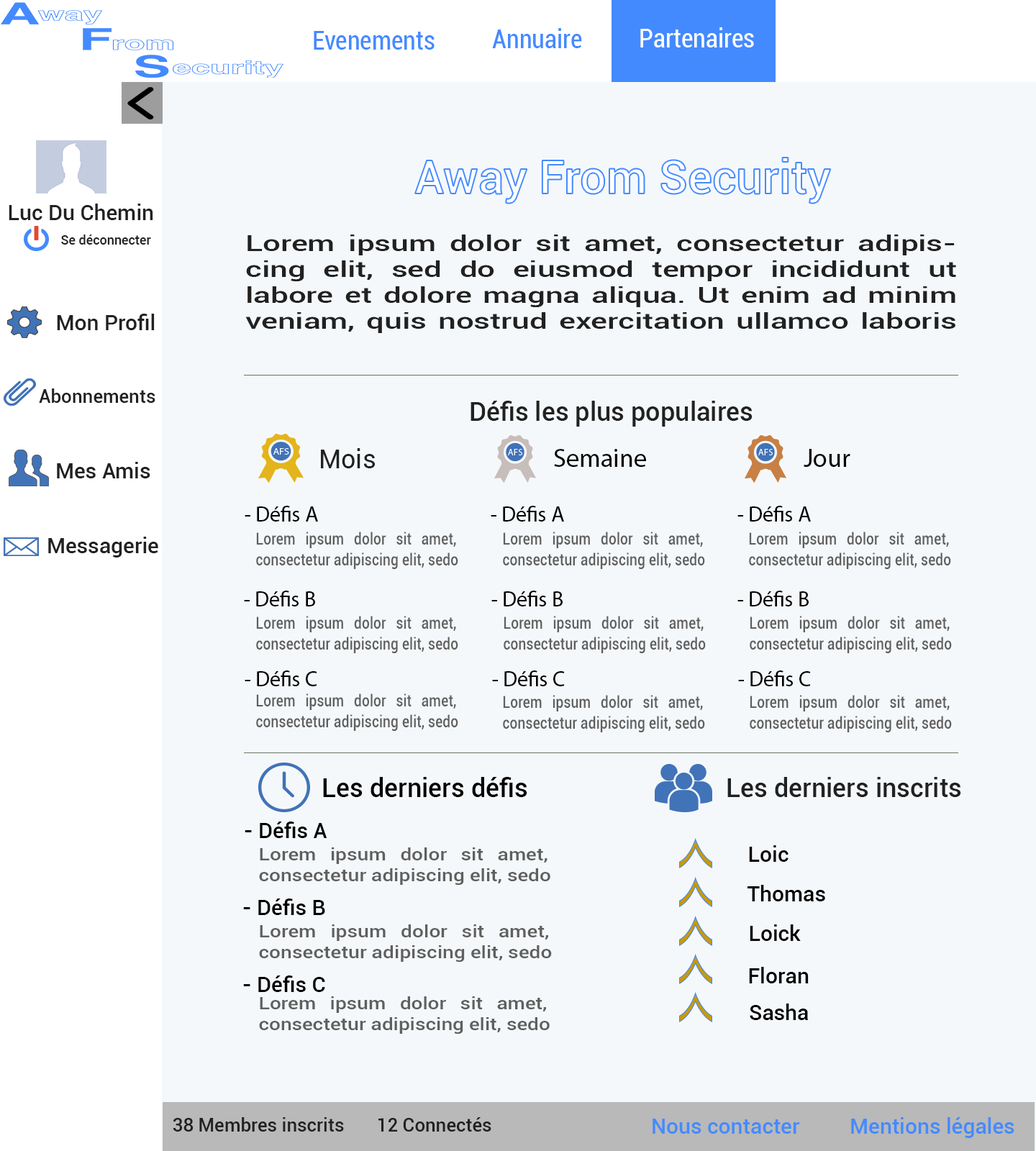
<style>
.page{position:relative;width:1036px;height:1151px;background:#f5f8fa}
.page>*{position:absolute;margin:0}
.t1{font:25.9px "Roboto-Condensed";color:#448aff}
.t2{font:25.9px "Roboto-Condensed";color:#ffffff}
.t3{font:46.8px "Roboto-Medium";color:#ffffff}
.t4{font:21.6px "Roboto-Medium";color:#212121}
.t5{font:12.9px "Roboto-Medium";color:#212121}
.t6{font:21.6px "Roboto-Medium";color:#212121;scale:1.45 1}
.t7{font:18.7px "Roboto-Medium";color:#212121}
.t8{font:25.9px "Roboto-Medium";color:#212121}
.t9{font:25.9px "Roboto-Regular";color:#212121}
.t10{font:25.9px "MyriadPro-Regular";color:#010101}
.t11{font:21.6px "MyriadPro-Regular";color:#000000}
.t12{font:17.3px "Roboto-Medium";color:#5f5f5f;scale:0.81 1}
.t13{font:25.9px "Roboto-Medium";color:#000000}
.t14{font:21.6px "Roboto-Medium";color:#000000}
.t15{font:17.3px "Roboto-Medium";color:#5f5f5f;scale:1.17 1}
.t16{font:17.3px "Roboto-Medium";color:#5f5f5f;scale:1.16 1}
.t17{font:21.6px "Roboto-Medium";color:#448aff}
</style>
<div class="page">
<p class="t1" style="left:492px;top:28px;width:90px;height:20px">Annuaire</p>
<p class="t2" style="left:640px;top:27px;width:114px;height:20px">Partenaires</p>
<p class="t1" style="left:314px;top:31px;width:121px;height:19px">Evenements</p>
<p class="t3" style="left:415px;top:158px;width:416px;height:46px">Away From Security</p>
<p class="t4" style="left:9px;top:204px;width:144px;height:16px">Luc Du Chemin</p>
<p class="t5" style="left:61px;top:235px;width:90px;height:10px">Se déconnecter</p>
<p class="t6" style="left:245px;top:235px;width:711px;height:98px;text-align:justify">Lorem ipsum dolor sit amet, consectetur adipiscing elit, sed do eiusmod tempor incididunt ut labore et dolore magna aliqua. Ut enim ad minim veniam, quis nostrud exercitation ullamco laboris nisi ut aliquip ex ea.</p>
<p class="t4" style="left:57px;top:314px;width:98px;height:16px">Mon Profil</p>
<p class="t7" style="left:39px;top:388px;width:116px;height:15px">Abonnements</p>
<p class="t8" style="left:470px;top:401px;width:283px;height:26px">Défis les plus populaires</p>
<p class="t9" style="left:321px;top:448px;width:54px;height:20px">Mois</p>
<p class="t10" style="left:554px;top:449px;width:92px;height:18px">Semaine</p>
<p class="t10" style="left:804px;top:449px;width:46px;height:18px">Jour</p>
<p class="t4" style="left:57px;top:462px;width:93px;height:16px">Mes Amis</p>
<p class="t11" style="left:245px;top:506px;width:73px;height:16px">- Défis A</p>
<p class="t11" style="left:491px;top:506px;width:73px;height:16px">- Défis A</p>
<p class="t11" style="left:737px;top:506px;width:74px;height:16px">- Défis A</p>
<p class="t12" style="left:256px;top:532px;width:202px;height:37px;text-align:justify">Lorem ipsum dolor sit amet, consectetur adipiscing elit, sedo</p>
<p class="t12" style="left:503px;top:532px;width:202px;height:37px;text-align:justify">Lorem ipsum dolor sit amet, consectetur adipiscing elit, sedo</p>
<p class="t12" style="left:749px;top:532px;width:202px;height:37px;text-align:justify">Lorem ipsum dolor sit amet, consectetur adipiscing elit, sedo</p>
<p class="t4" style="left:48px;top:537px;width:110px;height:21px">Messagerie</p>
<p class="t11" style="left:244px;top:591px;width:71px;height:15px">- Défis B</p>
<p class="t11" style="left:491px;top:591px;width:72px;height:15px">- Défis B</p>
<p class="t11" style="left:737px;top:591px;width:72px;height:15px">- Défis B</p>
<p class="t12" style="left:256px;top:616px;width:202px;height:37px;text-align:justify">Lorem ipsum dolor sit amet, consectetur adipiscing elit, sedo</p>
<p class="t12" style="left:504px;top:616px;width:202px;height:37px;text-align:justify">Lorem ipsum dolor sit amet, consectetur adipiscing elit, sedo</p>
<p class="t12" style="left:750px;top:616px;width:202px;height:37px;text-align:justify">Lorem ipsum dolor sit amet, consectetur adipiscing elit, sedo</p>
<p class="t11" style="left:245px;top:670px;width:72px;height:16px">- Défis C</p>
<p class="t11" style="left:492px;top:670px;width:73px;height:16px">- Défis C</p>
<p class="t11" style="left:738px;top:670px;width:73px;height:16px">- Défis C</p>
<p class="t12" style="left:256px;top:694px;width:202px;height:37px;text-align:justify">Lorem ipsum dolor sit amet, consectetur adipiscing elit, sedo</p>
<p class="t12" style="left:503px;top:695px;width:202px;height:37px;text-align:justify">Lorem ipsum dolor sit amet, consectetur adipiscing elit, sedo</p>
<p class="t12" style="left:750px;top:695px;width:202px;height:37px;text-align:justify">Lorem ipsum dolor sit amet, consectetur adipiscing elit, sedo</p>
<p class="t13" style="left:323px;top:777px;width:204px;height:20px">Les derniers défis</p>
<p class="t8" style="left:727px;top:777px;width:234px;height:20px">Les derniers inscrits</p>
<p class="t14" style="left:245px;top:822px;width:82px;height:16px">- Défis A</p>
<p class="t14" style="left:749px;top:845px;width:39px;height:17px">Loic</p>
<p class="t15" style="left:259px;top:847px;width:291px;height:38px;text-align:justify">Lorem ipsum dolor sit amet, consectetur adipiscing elit, sedo</p>
<p class="t14" style="left:747px;top:885px;width:78px;height:16px">Thomas</p>
<p class="t14" style="left:243px;top:899px;width:82px;height:16px">- Défis B</p>
<p class="t15" style="left:259px;top:924px;width:293px;height:38px;text-align:justify">Lorem ipsum dolor sit amet, consectetur adipiscing elit, sedo</p>
<p class="t14" style="left:750px;top:924px;width:51px;height:17px">Loick</p>
<p class="t14" style="left:243px;top:976px;width:82px;height:16px">- Défis C</p>
<p class="t14" style="left:749px;top:967px;width:60px;height:16px">Floran</p>
<p class="t16" style="left:259px;top:996px;width:291px;height:38px;text-align:justify">Lorem ipsum dolor sit amet, consectetur adipiscing elit, sedo</p>
<p class="t14" style="left:750px;top:1004px;width:58px;height:16px">Sasha</p>
<p class="t7" style="left:173px;top:1117px;width:318px;height:15px">38 Membres inscrits       12 Connectés</p>
<p class="t17" style="left:653px;top:1119px;width:147px;height:15px">Nous contacter</p>
<p class="t17" style="left:851px;top:1117px;width:163px;height:21px">Mentions légales</p>
</div>
